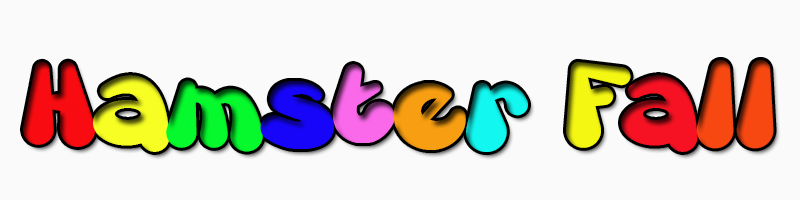
<style>
.page{position:relative;width:800px;height:200px;background:#fbfafa}
.page>*{position:absolute;margin:0}
.t1{font:85px "Gretoon";color:#f74812}
.t2{font:85px "Gretoon";color:#050505}
.t3{font:85px "Gretoon";color:#f80c11}
.t4{font:85px "Gretoon";color:#f6fe23}
.t5{font:85px "Gretoon";color:#05f92d}
.t6{font:85px "Gretoon";color:#1605f9}
.t7{font:85px "Gretoon";color:#f969ea}
.t8{font:85px "Gretoon";color:#f79e12}
.t9{font:85px "Gretoon";color:#12f7ef}
.t10{font:85px "Gretoon";color:#f4f712}
.t11{font:85px "Gretoon";color:#f71223}
</style>
<div class="page">
<p class="t1" style="left:23px;top:60px;width:751px;height:92px"><span class="t2">        </span><span class="t3">H</span><span class="t4">a</span><span class="t5">m</span><span class="t6">s</span><span class="t7">t</span><span class="t8">e</span><span class="t9">r </span><span class="t10">F</span><span class="t11">a</span>ll</p>
</div>
